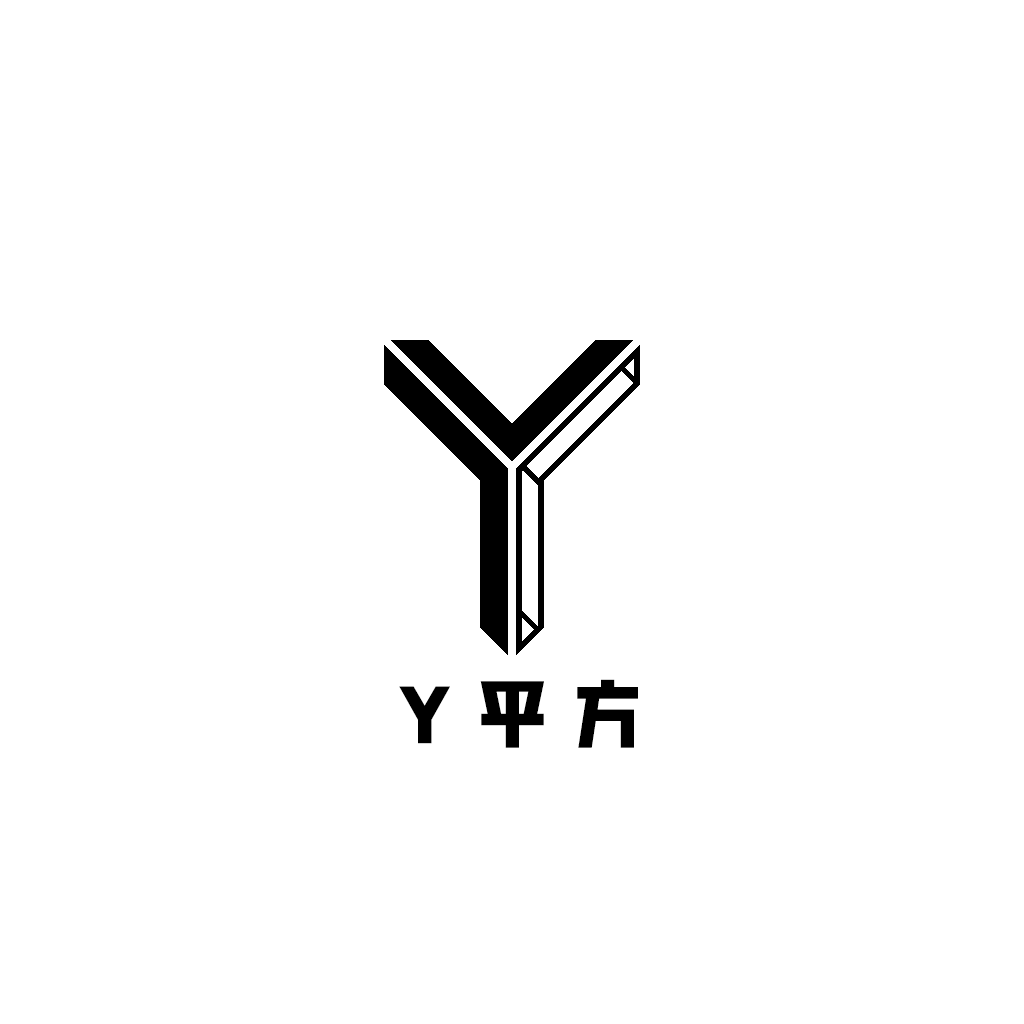
<style>
.page{position:relative;width:1024px;height:1024px;background:#ffffff}
.page>*{position:absolute;margin:0}
.t1{font:72px "MFGeHei-Regular";letter-spacing:0.05em;color:#000000}
</style>
<div class="page">
<p class="t1" style="left:399px;top:679px;width:239px;height:69px">Y平方</p>
</div>
